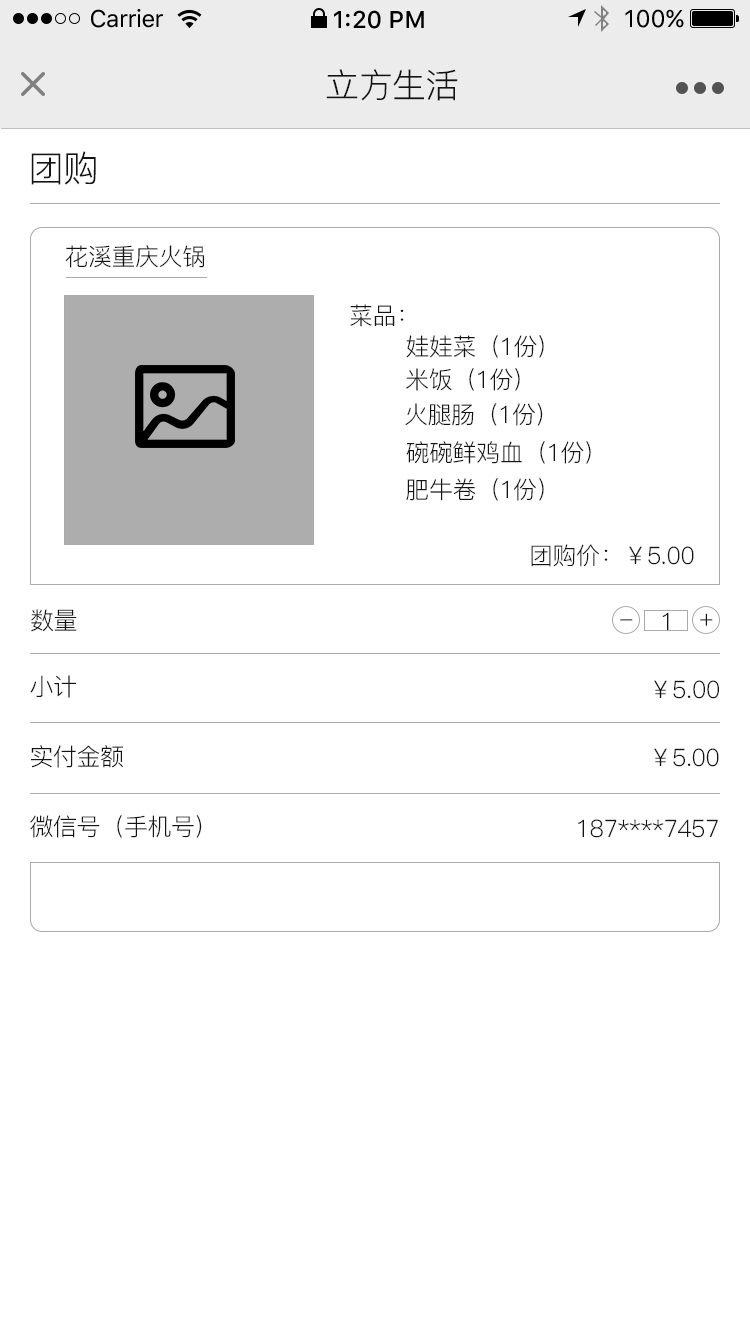
<style>
.page{position:relative;width:750px;height:1334px;background:#ffffff}
.page>*{position:absolute;margin:0}
.t1{font:24px "SFUIText-Regular";letter-spacing:-0.025em;color:#000000}
.t2{font:24px "SFUIText-Medium";color:#000000}
.t3{font:24px "SFUIText-Regular";color:#000000}
.t4{font:34px "PingFang-SC-Regular";letter-spacing:-0.02em;color:#141414}
.t5{font:36px "PingFang-SC-Regular";letter-spacing:-0.02em;color:#141414}
.t6{font:24px "PingFang-SC-Regular";letter-spacing:-0.02em;color:#141414}
.t7{font:24px "PingFang-SC-Regular";letter-spacing:-0.02em}
</style>
<div class="page">
<p class="t1" style="left:91px;top:9px;width:72px;height:19px">Carrier</p>
<p class="t2" style="left:334px;top:10px;width:90px;height:19px">1:20 PM</p>
<p class="t3" style="left:625px;top:9px;width:59px;height:19px">100%</p>
<p class="t4" style="left:326px;top:69px;width:132px;height:32px">立方生活</p>
<p class="t5" style="left:31px;top:151px;width:65px;height:34px">团购</p>
<p class="t6" style="left:65px;top:245px;width:139px;height:23px">花溪重庆火锅</p>
<p class="t6" style="left:350px;top:304px;width:54px;height:23px">菜品：</p>
<p class="t6" style="left:406px;top:335px;width:138px;height:23px">娃娃菜（1份）</p>
<p class="t6" style="left:406px;top:368px;width:114px;height:23px">米饭（1份）</p>
<p class="t6" style="left:405px;top:403px;width:138px;height:23px">火腿肠（1份）</p>
<p class="t6" style="left:406px;top:441px;width:185px;height:23px">碗碗鲜鸡血（1份）</p>
<p class="t6" style="left:406px;top:478px;width:138px;height:23px">肥牛卷（1份）</p>
<p class="t6" style="left:531px;top:544px;width:163px;height:23px">团购价：￥5.00</p>
<p class="t6" style="left:31px;top:609px;width:46px;height:23px">数量</p>
<p class="t6" style="left:662px;top:612px;width:7px;height:18px">1</p>
<p class="t6" style="left:700px;top:613px;width:13px;height:13px">+</p>
<p class="t7" style="left:620px;top:619px;width:13px;height:2px">-</p>
<p class="t6" style="left:30px;top:675px;width:46px;height:23px">小计</p>
<p class="t6" style="left:654px;top:680px;width:65px;height:19px">￥5.00</p>
<p class="t6" style="left:31px;top:745px;width:92px;height:23px">实付金额</p>
<p class="t6" style="left:654px;top:748px;width:65px;height:19px">￥5.00</p>
<p class="t6" style="left:30px;top:815px;width:172px;height:23px">微信号（手机号）</p>
<p class="t6" style="left:578px;top:819px;width:140px;height:19px">187****7457</p>
</div>
